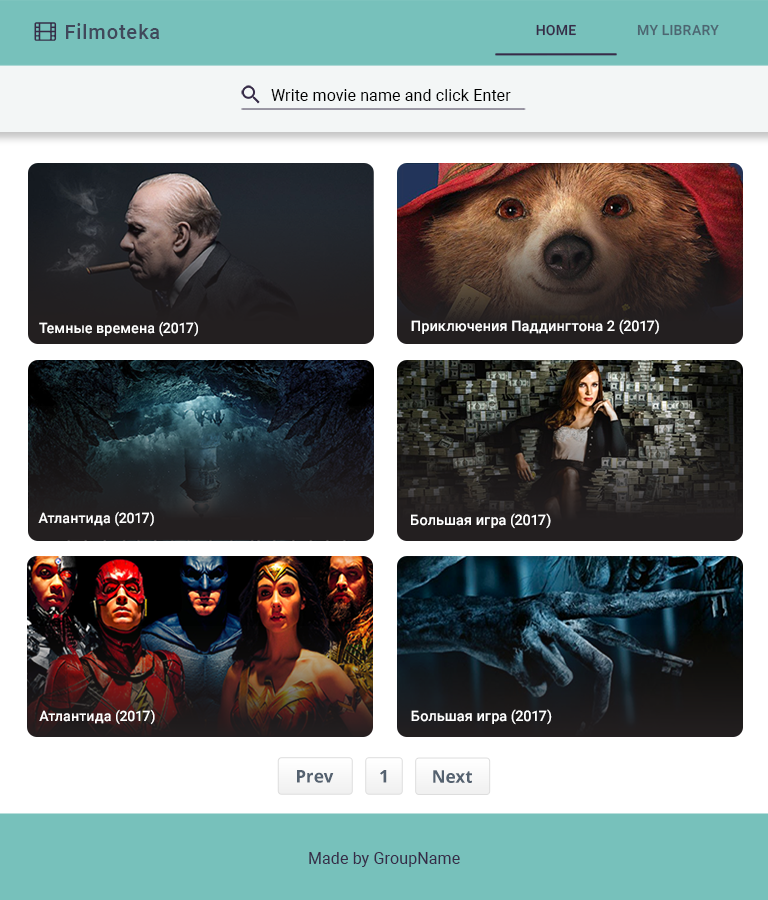
<style>
.page{position:relative;width:768px;height:900px;background:#ffffff}
.page>*{position:absolute;margin:0}
.t1{font:20px "Roboto-Medium";letter-spacing:0.05em;color:#41485b}
.t2{font:14px "Roboto-Medium";letter-spacing:0.01em;color:#372c48;text-transform:uppercase}
.t3{font:14px "Roboto-Medium";letter-spacing:0.01em;color:#4d6671;text-transform:uppercase}
.t4{font:16px "Roboto-Regular";letter-spacing:0.01em;color:#000000}
.t5{font:14.3px "Roboto-Medium";color:#ffffff}
.t6{font:14.5px "Roboto-Medium";color:#ffffff}
.t7{font:17.5px "DroidSans-Bold";color:#556270}
.t8{font:16px "Roboto-Regular";letter-spacing:0.01em;color:#372c48}
</style>
<div class="page">
<p class="t1" style="left:66px;top:23px;width:94px;height:16px">Filmoteka</p>
<p class="t2" style="left:536px;top:24px;width:40px;height:12px">HOME</p>
<p class="t3" style="left:637px;top:24px;width:82px;height:12px">my library</p>
<p class="t4" style="left:271px;top:89px;width:240px;height:12px">Write movie name and click Enter</p>
<p class="t5" style="left:39px;top:321px;width:159px;height:16px">Темные времена (2017)</p>
<p class="t6" style="left:411px;top:319px;width:248px;height:16px">Приключения Паддингтона 2 (2017)</p>
<p class="t5" style="left:38px;top:511px;width:116px;height:16px">Атлантида (2017)</p>
<p class="t6" style="left:411px;top:513px;width:140px;height:16px">Большая игра (2017)</p>
<p class="t5" style="left:39px;top:709px;width:116px;height:16px">Атлантида (2017)</p>
<p class="t6" style="left:411px;top:709px;width:141px;height:16px">Большая игра (2017)</p>
<p class="t7" style="left:297px;top:770px;width:37px;height:13px">Prev</p>
<p class="t7" style="left:380px;top:770px;width:7px;height:13px">1</p>
<p class="t7" style="left:433px;top:770px;width:39px;height:13px">Next</p>
<p class="t8" style="left:309px;top:852px;width:151px;height:15px">Made by GroupName</p>
</div>
